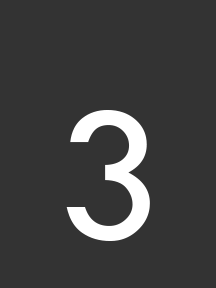
<style>
.page{position:relative;width:216px;height:288px;background:#333333}
.page>*{position:absolute;margin:0}
.t1{font:196px "TwCenMT-Regular";color:#ffffff}
</style>
<div class="page">
<p class="t1" style="left:66px;top:110px;width:84px;height:131px">3</p>
</div>
